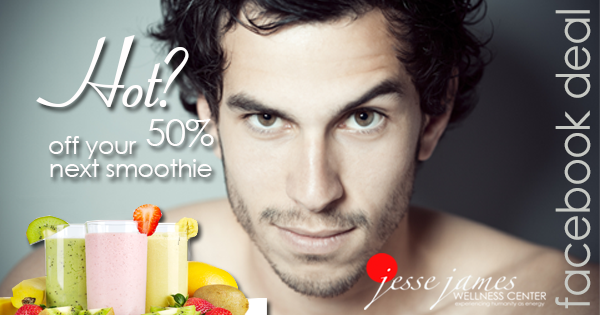
<style>
.page{position:relative;width:600px;height:315px}
.page>*{position:absolute;margin:0}
.t1{font:46.3px "CenturyGothic";letter-spacing:-0.02em;color:#c6c8c3;scale:0.93 1}
.t2{font:101.1px "Aspire-DemiBold";letter-spacing:-0.02em;color:#fffdfd}
.t3{font:37.5px "CenturyGothic";letter-spacing:-0.02em;color:#fffdfd}
.t4{font:25px "CenturyGothic";letter-spacing:-0.02em;color:#fffdfd}
.t5{font:12px "CenturyGothic";letter-spacing:-0.02em;color:#fffdfd}
</style>
<div class="page">
<p class="t1" style="left:555px;top:10px;width:36px;height:299px;rotate:-90deg">facebook deal</p>
<p class="t2" style="left:36px;top:35px;width:153px;height:72px">Hot?</p>
<p class="t3" style="left:146px;top:119px;width:68px;height:28px">50%</p>
<p class="t4" style="left:49px;top:136px;width:88px;height:23px">off your</p>
<p class="t5" style="left:50px;top:159px;width:162px;height:18px">next smoothie</p>
</div>
